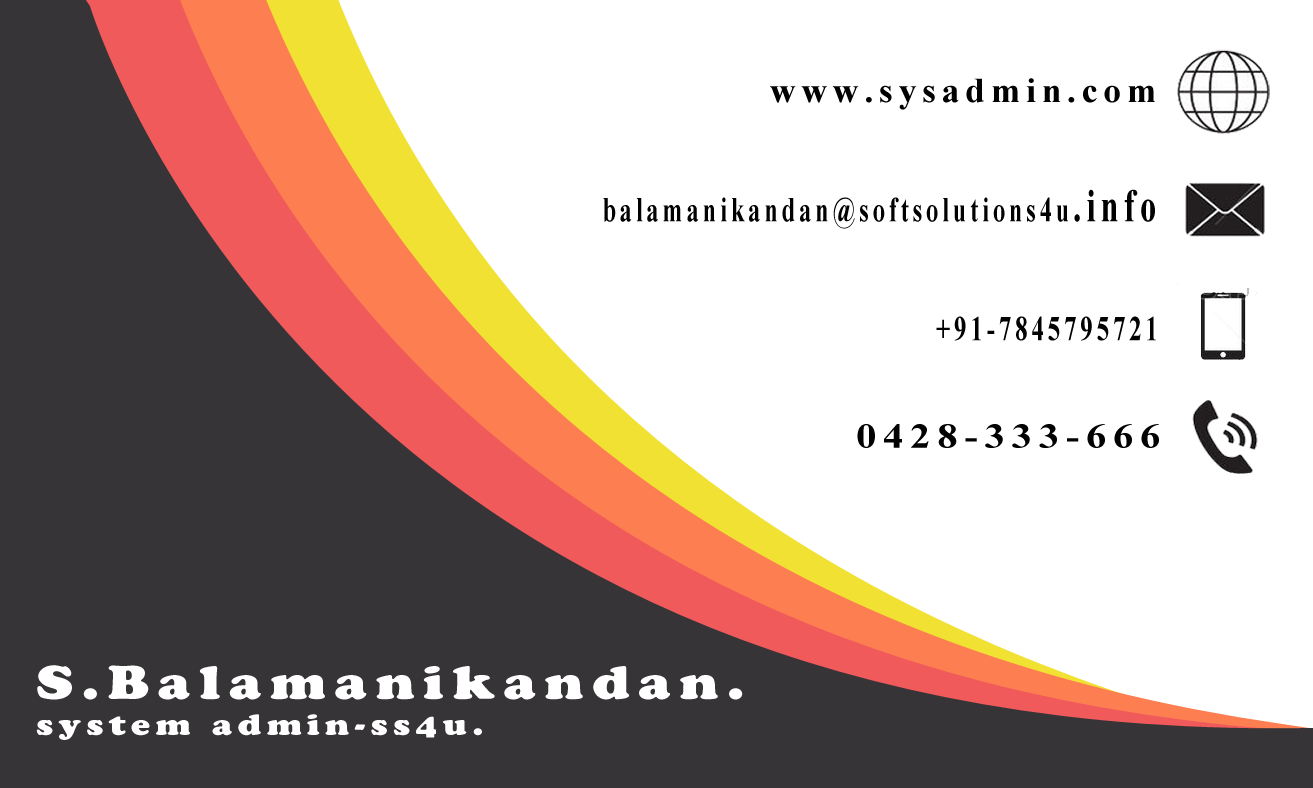
<style>
.page{position:relative;width:1313px;height:788px;background:#ffffff}
.page>*{position:absolute;margin:0}
.t1{font:34.9px "TimesNewRomanPS-BoldMT";letter-spacing:0.16em;color:#010101}
.t2{font:33.5px "StencilStd";letter-spacing:0.16em;color:#010101}
.t3{font:34.9px "TimesNewRomanPS-BoldMT";letter-spacing:0.16em;color:#010101;scale:0.7 1}
.t4{font:46.6px "TimesNewRomanPS-BoldMT";letter-spacing:0.16em;color:#010101;scale:0.7 1}
.t5{font:34.9px "TimesNewRomanPS-BoldMT";letter-spacing:0.16em;color:#010101;scale:0.71 1}
.t6{font:34.9px "TimesNewRomanPS-BoldMT";letter-spacing:0.16em;color:#010101;scale:1.18 1}
.t7{font:29.1px "CooperBlackStd";letter-spacing:0.16em;color:#ffffff;scale:1.18 1}
.t8{font:46.6px "CooperBlackStd";letter-spacing:0.16em;color:#ffffff;scale:1.18 1}
</style>
<div class="page">
<p class="t1" style="left:770px;top:78px;width:385px;height:32px"><span class="t2"><br></span>www.sysadmin.com</p>
<p class="t3" style="left:603px;top:189px;width:552px;height:40px">balamanikandan@softsolutions4u<span class="t4">.info</span></p>
<p class="t5" style="left:936px;top:316px;width:220px;height:25px">+91-7845795721</p>
<p class="t6" style="left:857px;top:424px;width:302px;height:24px">0428-333-666</p>
<p class="t7" style="left:36px;top:665px;width:707px;height:75px"><span class="t8">S.Balamanikandan.<br></span>system admin-ss4u.</p>
</div>
